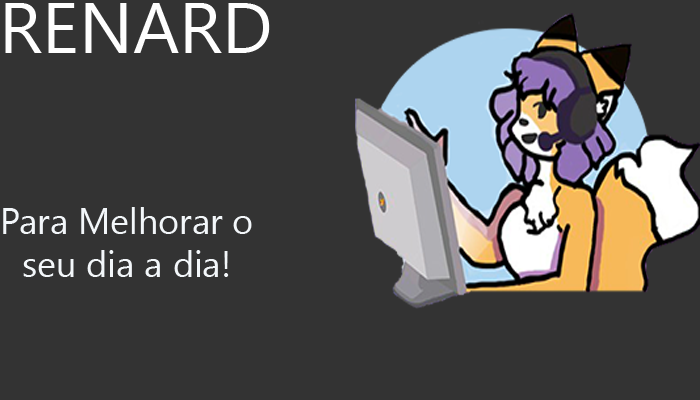
<style>
.page{position:relative;width:700px;height:400px;background:#333333}
.page>*{position:absolute;margin:0}
.t1{font:72px "LeelawadeeUI";color:#fefefe}
.t2{font:36px "LeelawadeeUI";color:#f3f7fa}
</style>
<div class="page">
<p class="t1" style="left:5px;top:3px;width:265px;height:50px">RENARD</p>
<p class="t2" style="left:3px;top:207px;width:249px;height:70px;text-align:center">Para Melhorar o<br>seu dia a dia!</p>
</div>
